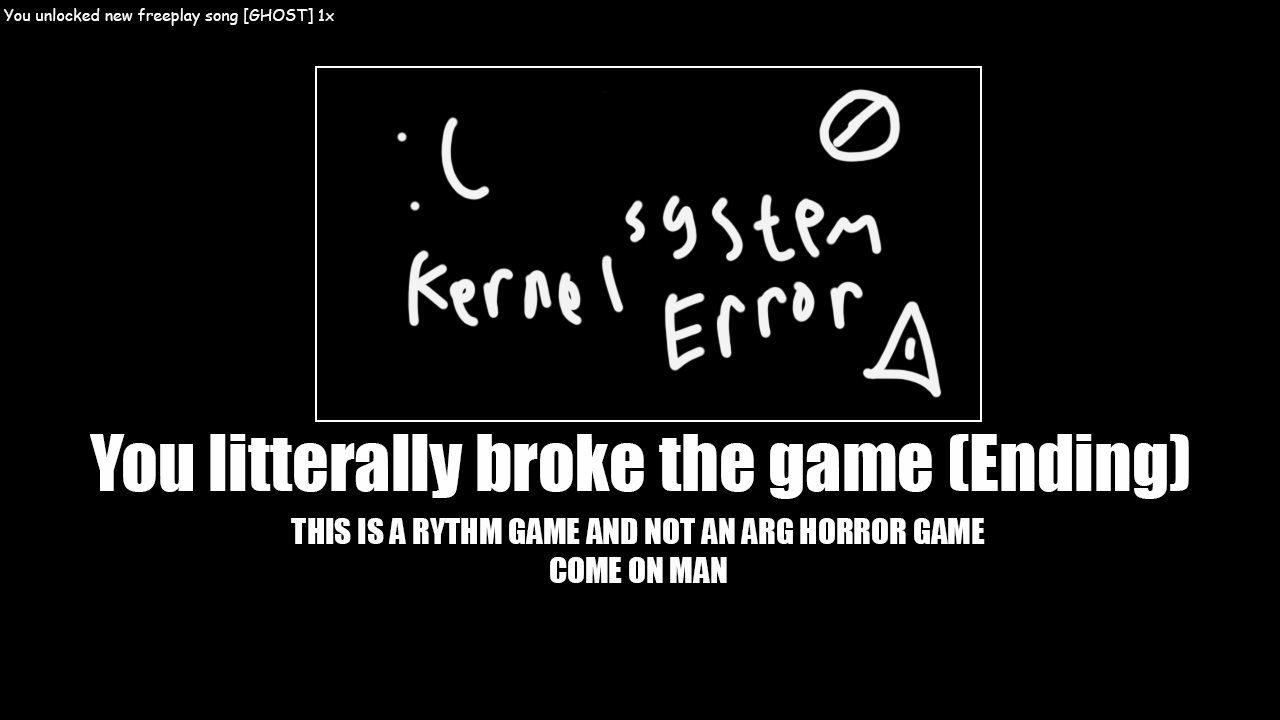
<style>
.page{position:relative;width:1280px;height:720px;background:#000000}
.page>*{position:absolute;margin:0}
.t1{font:16px "ComicSansMS";color:#fefefe}
.t2{font:72px "Impact";color:#fefefe}
.t3{font:32.9px "Impact";color:#fefefe}
</style>
<div class="page">
<p class="t1" style="left:4px;top:8px;width:330px;height:18px">You unlocked new freeplay song [GHOST] 1x</p>
<p class="t2" style="left:90px;top:434px;width:1099px;height:65px">You litterally broke the game (Ending)</p>
<p class="t3" style="left:291px;top:518px;width:694px;height:65px;text-align:center">THIS IS A RYTHM GAME AND NOT AN ARG HORROR GAME<br>COME ON MAN</p>
</div>
